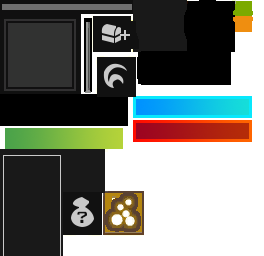
<style>
.page{position:relative;width:264px;height:256px;background:#ffffff}
.page>*{position:absolute;margin:0}
.t1{font:22px "BankGothicBold";letter-spacing:-0.05em;color:#111111}
</style>
<div class="page">
<p class="t1" style="left:77px;top:211px;width:10px;height:12px">?</p>
</div>
